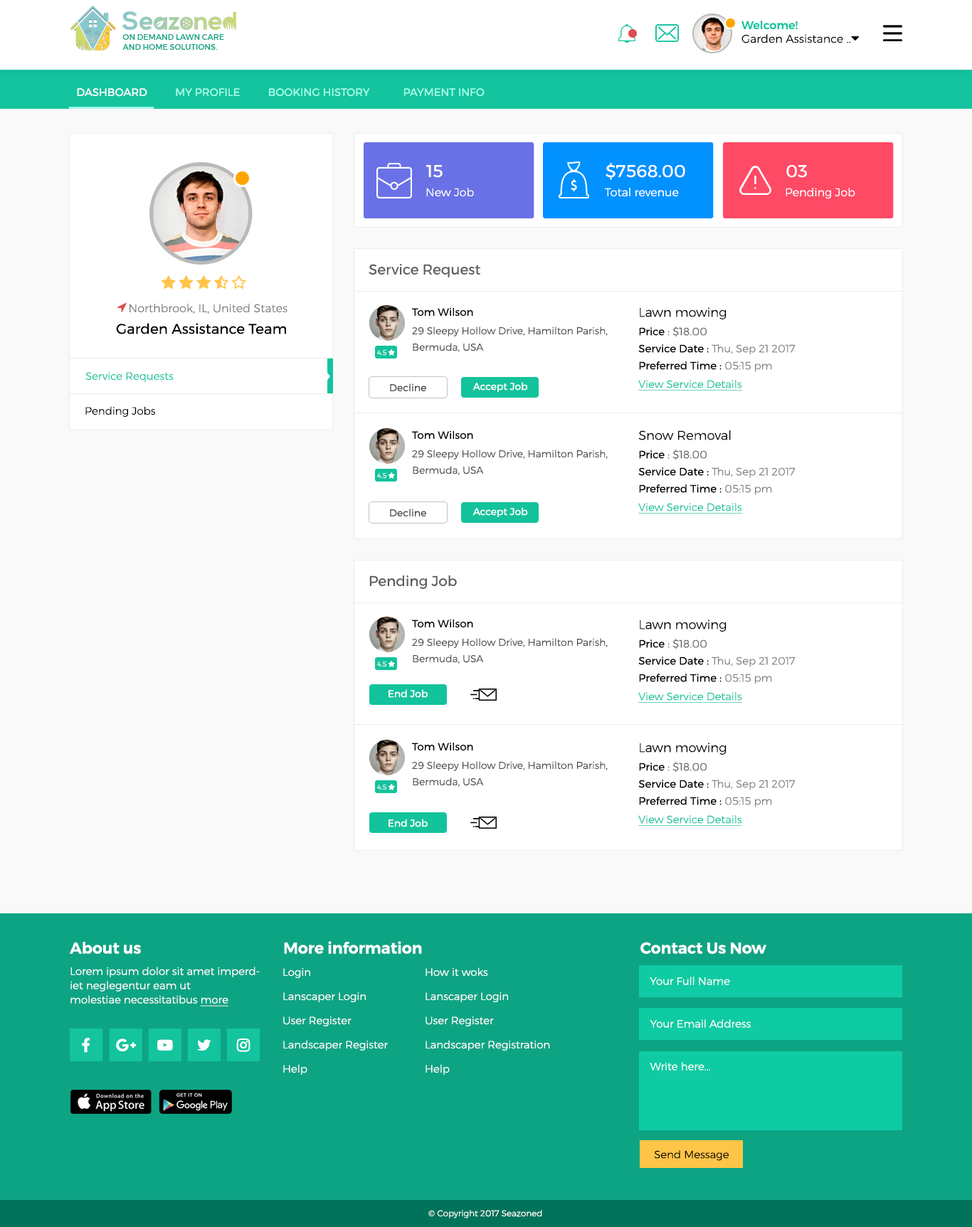
<style>
.page{position:relative;width:972px;height:1227px;background:#ffffff}
.page>*{position:absolute;margin:0}
.t1{font:11.4px "Montserrat-Light";color:#000000}
.t2{font:11.4px "Montserrat-Medium";color:#13c49e}
.t3{font:7.8px "Montserrat-Medium";color:#0da484;text-transform:uppercase}
.t4{font:10.7px "Montserrat-Regular";color:#a6feeb;text-transform:uppercase}
.t5{font:10.7px "Montserrat-Regular";color:#ffffff;text-transform:uppercase}
.t6{font:17.1px "Montserrat-Regular";color:#ffffff}
.t7{font:11.4px "Montserrat-Light";color:#ffffff}
.t8{font:14.2px "Montserrat-Regular";color:#5e5e5e}
.t9{font:11.4px "Montserrat-Light";color:#808080}
.t10{font:10.7px "Montserrat-Regular";color:#000000}
.t11{font:10.7px/18.5px "Montserrat-Light";color:#13c49e;text-decoration:underline}
.t12{font:12.8px/17.1px "Montserrat-Light";color:#000000}
.t13{font:10.7px/18.5px "Montserrat-Regular";color:#000000}
.t14{font:10.7px/18.5px "Montserrat-Light";color:#616161}
.t15{font:10.7px/17.1px "Montserrat-Regular";color:#000000}
.t16{font:10.7px/17.1px "Montserrat-Light";color:#838383}
.t17{font:14.2px "Montserrat-Regular";color:#000000}
.t18{font:10px/16.4px "Montserrat-Light";color:#474747}
.t19{font:10.7px "Montserrat-Light";color:#13c49e}
.t20{font:10px "Montserrat-Regular";color:#505050}
.t21{font:10px "Montserrat-Regular";color:#ffffff}
.t22{font:10.7px "Montserrat-Light";color:#000000}
.t23{font:15.7px "Montserrat-SemiBold";color:#ffffff}
.t24{font:10.7px/14.2px "Montserrat-Light";color:#ffffff}
.t25{font:10.7px/14.2px "Montserrat-Light";color:#ffffff;text-decoration:underline}
.t26{font:10.7px/24.2px "Montserrat-Light";color:#ffffff}
.t27{font:10.7px "Montserrat-Light";color:#ffffff}
.t28{font:8.5px "Montserrat-Light";color:#ffffff}
</style>
<div class="page">
<p class="t1" style="left:741px;top:21px;width:109px;height:22px"><span class="t2">Welcome! <br></span>Garden Assistance ..</p>
<p class="t3" style="left:122px;top:34px;width:102px;height:16px">on demand lawn care <br>and home solutions.</p>
<p class="t4" style="left:77px;top:88px;width:407px;height:9px"><span class="t5">DASHBOARD</span>          MY PROFILE          booking history            payment info</p>
<p class="t6" style="left:426px;top:165px;width:16px;height:13px">15</p>
<p class="t6" style="left:605px;top:163px;width:80px;height:17px">$7568.00</p>
<p class="t6" style="left:786px;top:165px;width:21px;height:13px">03</p>
<p class="t7" style="left:426px;top:188px;width:48px;height:9px">New Job</p>
<p class="t7" style="left:605px;top:188px;width:74px;height:9px">Total revenue</p>
<p class="t7" style="left:785px;top:188px;width:70px;height:11px">Pending Job</p>
<p class="t8" style="left:368px;top:264px;width:112px;height:13px">Service Request</p>
<p class="t9" style="left:129px;top:304px;width:158px;height:10px">Northbrook, IL, United States</p>
<p class="t10" style="left:412px;top:307px;width:61px;height:10px">Tom Wilson</p>
<p class="t11" style="left:638px;top:307px;width:157px;height:84px"><span class="t12">Lawn mowing<br></span><span class="t13">Price</span><span class="t14"> : $18.00<br></span><span class="t15">Service Date : </span><span class="t16">Thu, Sep 21 2017<br></span><span class="t15">Preferred Time : </span><span class="t16">05:15 pm<br></span>View Service Details</p>
<p class="t17" style="left:116px;top:323px;width:170px;height:11px">Garden Assistance Team</p>
<p class="t18" style="left:412px;top:327px;width:196px;height:25px">29 Sleepy Hollow Drive, Hamilton Parish, <br>Bermuda, USA</p>
<p class="t19" style="left:85px;top:372px;width:89px;height:10px">Service Requests</p>
<p class="t20" style="left:390px;top:383px;width:36px;height:9px">Decline</p>
<p class="t21" style="left:472px;top:382px;width:56px;height:10px">Accept Job</p>
<p class="t22" style="left:85px;top:406px;width:70px;height:11px">Pending Jobs</p>
<p class="t10" style="left:412px;top:430px;width:61px;height:10px">Tom Wilson</p>
<p class="t11" style="left:638px;top:430px;width:157px;height:84px"><span class="t12">Snow Removal<br></span><span class="t13">Price</span><span class="t14"> : $18.00<br></span><span class="t15">Service Date : </span><span class="t16">Thu, Sep 21 2017<br></span><span class="t15">Preferred Time : </span><span class="t16">05:15 pm<br></span>View Service Details</p>
<p class="t18" style="left:412px;top:450px;width:196px;height:25px">29 Sleepy Hollow Drive, Hamilton Parish, <br>Bermuda, USA</p>
<p class="t20" style="left:390px;top:509px;width:36px;height:8px">Decline</p>
<p class="t21" style="left:472px;top:507px;width:56px;height:10px">Accept Job</p>
<p class="t8" style="left:369px;top:576px;width:88px;height:13px">Pending Job</p>
<p class="t10" style="left:412px;top:619px;width:61px;height:9px">Tom Wilson</p>
<p class="t11" style="left:638px;top:620px;width:157px;height:83px"><span class="t12">Lawn mowing<br></span><span class="t13">Price</span><span class="t14"> : $18.00<br></span><span class="t15">Service Date : </span><span class="t16">Thu, Sep 21 2017<br></span><span class="t15">Preferred Time : </span><span class="t16">05:15 pm<br></span>View Service Details</p>
<p class="t18" style="left:412px;top:638px;width:196px;height:26px">29 Sleepy Hollow Drive, Hamilton Parish, <br>Bermuda, USA</p>
<p class="t21" style="left:388px;top:689px;width:40px;height:9px">End Job</p>
<p class="t10" style="left:412px;top:742px;width:61px;height:9px">Tom Wilson</p>
<p class="t11" style="left:638px;top:743px;width:157px;height:83px"><span class="t12">Lawn mowing<br></span><span class="t13">Price</span><span class="t14"> : $18.00<br></span><span class="t15">Service Date : </span><span class="t16">Thu, Sep 21 2017<br></span><span class="t15">Preferred Time : </span><span class="t16">05:15 pm<br></span>View Service Details</p>
<p class="t18" style="left:412px;top:761px;width:196px;height:26px">29 Sleepy Hollow Drive, Hamilton Parish, <br>Bermuda, USA</p>
<p class="t21" style="left:388px;top:819px;width:40px;height:8px">End Job</p>
<p class="t23" style="left:70px;top:942px;width:71px;height:12px">About us</p>
<p class="t23" style="left:284px;top:941px;width:138px;height:13px">More information</p>
<p class="t23" style="left:640px;top:942px;width:126px;height:12px">Contact Us Now</p>
<p class="t24" style="left:70px;top:967px;width:190px;height:40px">Lorem ipsum dolor sit amet imperdiet neglegentur eam ut<br>molestiae necessitatibus <span class="t25">more</span></p>
<p class="t26" style="left:283px;top:968px;width:105px;height:107px">Login<br>Lanscaper Login<br>User Register<br>Landscaper Register<br>Help</p>
<p class="t26" style="left:425px;top:967px;width:125px;height:108px">How it woks<br>Lanscaper Login<br>User Register<br>Landscaper Registration<br>Help</p>
<p class="t27" style="left:649px;top:977px;width:81px;height:8px">Your Full Name</p>
<p class="t27" style="left:649px;top:1019px;width:101px;height:9px">Your Email Address</p>
<p class="t27" style="left:649px;top:1062px;width:61px;height:9px">Write here...</p>
<p class="t22" style="left:654px;top:1150px;width:74px;height:11px">Send Message</p>
<p class="t28" style="left:428px;top:1210px;width:114px;height:9px">© Copyright 2017 Seazoned</p>
</div>
